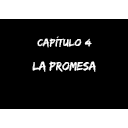
<style>
.page{position:relative;width:128px;height:128px;background:#000000}
.page>*{position:absolute;margin:0}
.t1{font:10.7px "EdoSZ";color:#ffffff;scale:1.05 1}
.t2{font:12.3px "EdoSZ";color:#ffffff}
</style>
<div class="page">
<p class="t1" style="left:37px;top:36px;width:55px;height:12px">Capítulo 4</p>
<p class="t2" style="left:32px;top:61px;width:64px;height:11px">La promesa</p>
</div>
